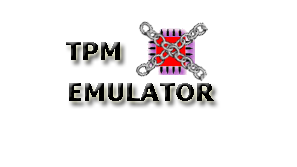
<style>
.page{position:relative;width:297px;height:167px;background:#ffffff}
.page>*{position:absolute;margin:0}
.t1{font:24px "Verdana-Bold";color:#000000}
</style>
<div class="page">
<p class="t1" style="left:66px;top:42px;width:54px;height:18px">TPM</p>
<p class="t1" style="left:69px;top:83px;width:145px;height:18px">EMULATOR</p>
</div>
